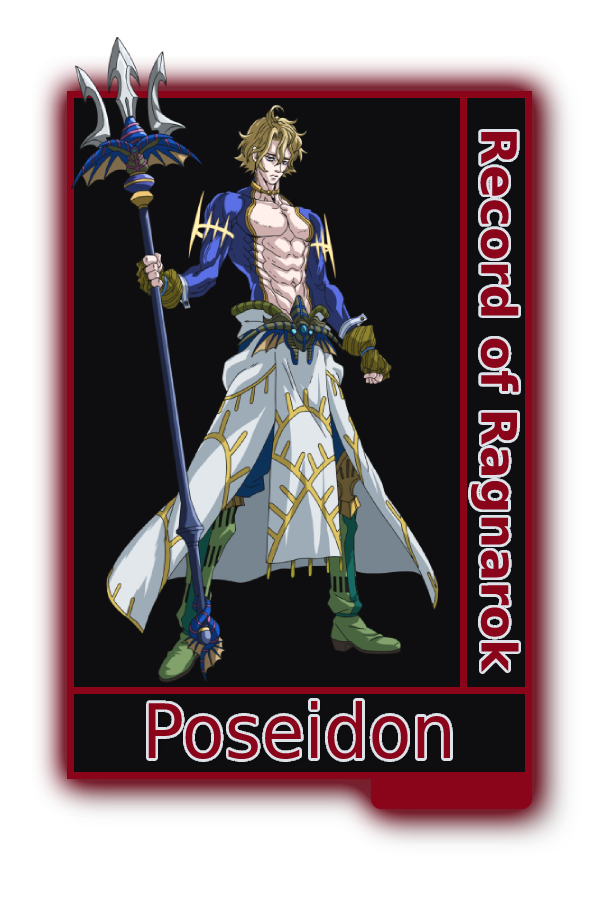
<style>
.page{position:relative;width:600px;height:900px;background:#0e0e10}
.page>*{position:absolute;margin:0}
.t1{font:48.8px "MADETOMMY-Bold";color:#8a051a}
.t2{font:75px "CoolveticaRg-Regular";color:#8a051a;scale:0.94 1}
</style>
<div class="page">
<p class="t1" style="left:470px;top:131px;width:49px;height:542px;rotate:90deg">Record of Ragnarok</p>
<p class="t2" style="left:148px;top:701px;width:302px;height:59px">Poseidon</p>
</div>
